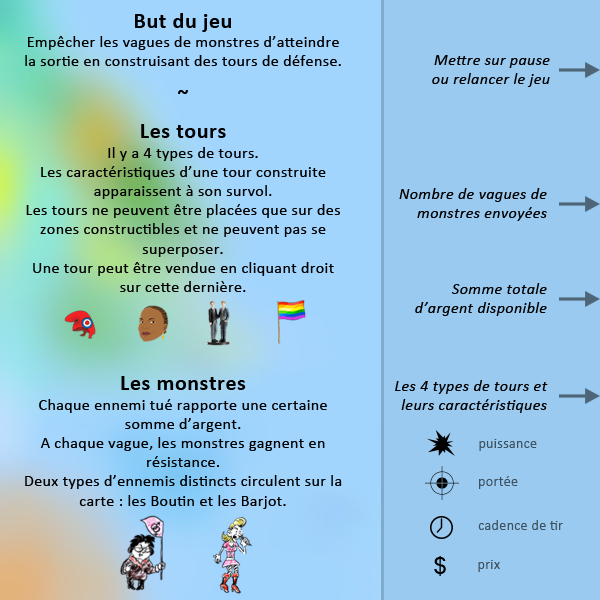
<style>
.page{position:relative;width:600px;height:600px;background:#9acaef}
.page>*{position:absolute;margin:0}
.t1{font:16px "Calibri";letter-spacing:0.025em;color:#000000}
.t2{font:22px "Calibri-Bold";letter-spacing:0.025em;color:#000000}
.t3{font:16px "Calibri-Italic";letter-spacing:0.025em;color:#000000}
.t4{font:14px "Calibri";letter-spacing:0.025em;color:#3e5160}
.t5{font:24px "ArialMT";letter-spacing:0.025em;color:#000000}
</style>
<div class="page">
<p class="t1" style="left:25px;top:13px;width:317px;height:496px;text-align:center"><span class="t2">But du jeu<br></span>Empêcher les vagues de monstres d’atteindre la sortie en construisant des tours de défense.<br><br><span class="t2">~<br>Les tours<br></span>Il y a 4 types de tours.<br>Les caractéristiques d’une tour construite apparaissent à son survol.<br>Les tours ne peuvent être placées que sur des zones constructibles et ne peuvent pas se superposer.<br>Une tour peut être vendue en cliquant droit sur cette dernière.<br><br><br><br><span class="t2">Les monstres<br></span>Chaque ennemi tué rapporte une certaine somme d’argent.<br>A chaque vague, les monstres gagnent en résistance.<br>Deux types d’ennemis distincts circulent sur la carte : les Boutin et les Barjot.</p>
<p class="t3" style="left:432px;top:55px;width:118px;height:32px;text-align:right">Mettre sur pause ou relancer le jeu</p>
<p class="t3" style="left:399px;top:188px;width:148px;height:33px;text-align:right">Nombre de vagues de monstres envoyées</p>
<p class="t3" style="left:415px;top:283px;width:132px;height:33px;text-align:right">Somme totale d’argent disponible</p>
<p class="t3" style="left:395px;top:380px;width:153px;height:33px;text-align:right">Les 4 types de tours et leurs caractéristiques</p>
<p class="t4" style="left:479px;top:439px;width:58px;height:12px">puissance</p>
<p class="t4" style="left:479px;top:476px;width:39px;height:13px">portée</p>
<p class="t4" style="left:478px;top:520px;width:85px;height:10px">cadence de tir</p>
<p class="t5" style="left:434px;top:556px;width:12px;height:20px">$</p>
<p class="t4" style="left:478px;top:560px;width:22px;height:12px">prix</p>
</div>
